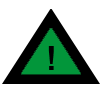
<style>
.page{position:relative;width:100px;height:100px;background:#ffffff}
.page>*{position:absolute;margin:0}
.t1{font:50px "BrowalliaUPC-Bold";color:#000000}
</style>
<div class="page">
<p class="t1" style="left:48px;top:46px;width:6px;height:24px">!</p>
</div>
